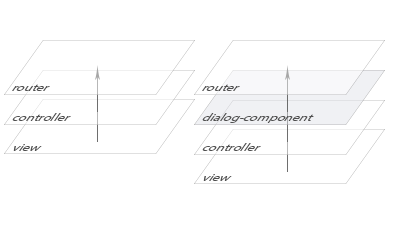
<style>
.page{position:relative;width:400px;height:225px;background:#ffffff}
.page>*{position:absolute;margin:0}
.t1{font:12.6px "MyriadPro-Regular";color:#4f4f4f;scale:1.11 1}
</style>
<div class="page">
<p class="t1" style="left:12px;top:84px;width:38px;height:7px">router</p>
<p class="t1" style="left:202px;top:84px;width:38px;height:7px">router</p>
<p class="t1" style="left:12px;top:113px;width:59px;height:8px">controller</p>
<p class="t1" style="left:202px;top:113px;width:112px;height:10px">dialog-component</p>
<p class="t1" style="left:13px;top:144px;width:29px;height:7px">view</p>
<p class="t1" style="left:202px;top:143px;width:59px;height:8px">controller</p>
<p class="t1" style="left:203px;top:174px;width:29px;height:7px">view</p>
</div>
